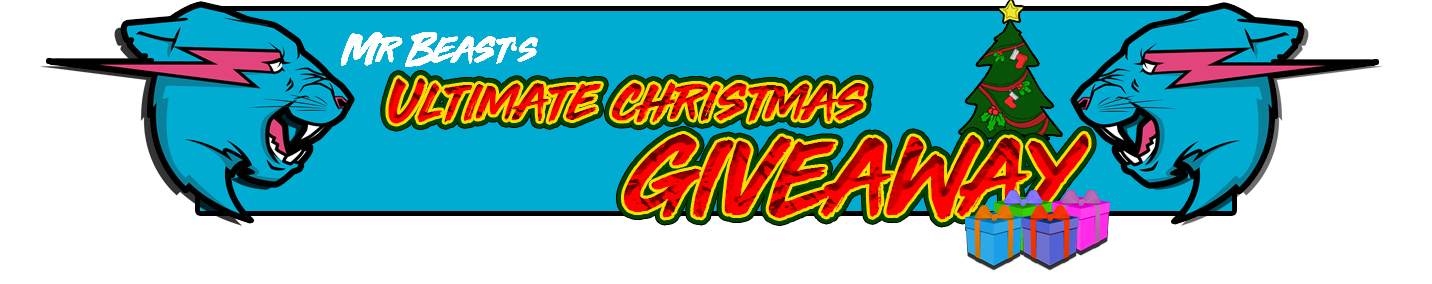
<style>
.page{position:relative;width:1432px;height:284px;background:#ffffff}
.page>*{position:absolute;margin:0}
.t1{font:60px/90px "ThirdRail"}
.t2{font:100px/90px "ThirdRail"}
</style>
<div class="page">
<p class="t1" style="left:388px;top:78px;width:701px;height:145px;text-align:center">Ultimate christmas<br><span class="t2">GIVEAWAY</span></p>
</div>
